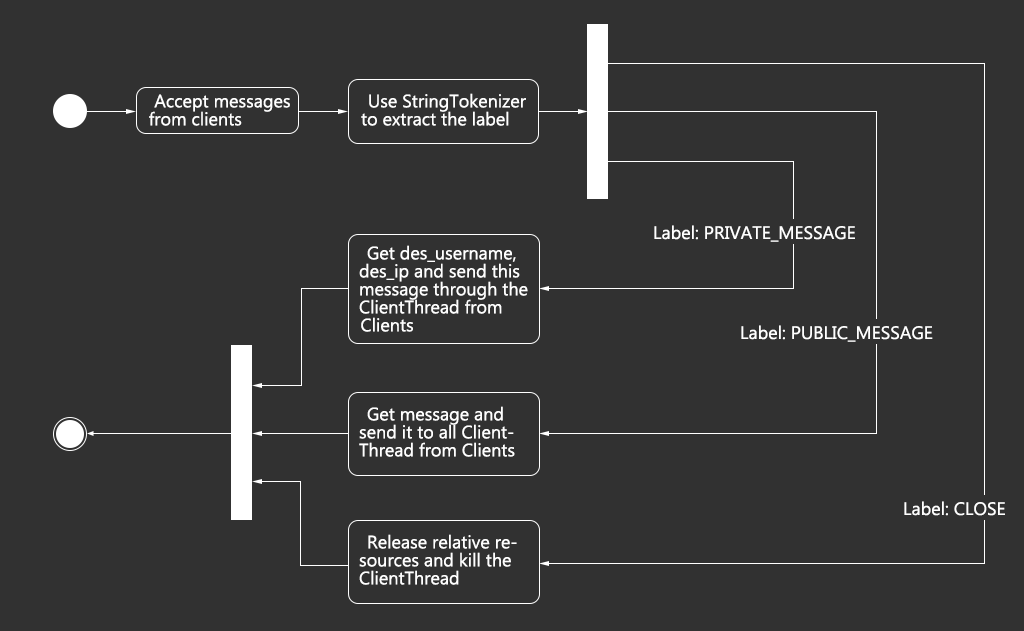
<style>
.page{position:relative;width:1024px;height:631px;background:#313131}
.page>*{position:absolute;margin:0}
.t1{font:18px/18px "MicrosoftNewTaiLue";color:#ffffff}
.t2{font:18px "MicrosoftNewTaiLue";color:#ffffff}
</style>
<div class="page">
<p class="t1" style="left:149px;top:94px;width:141px;height:32px">Accept messages from clients</p>
<p class="t1" style="left:361px;top:93px;width:165px;height:33px">Use StringTokenizer to extract the label</p>
<p class="t2" style="left:654px;top:225px;width:201px;height:17px">Label: PRIVATE_MESSAGE</p>
<p class="t1" style="left:359px;top:245px;width:169px;height:87px">Get des_username, des_ip and send this message through the ClientThread from Clients</p>
<p class="t2" style="left:741px;top:325px;width:192px;height:17px">Label: PUBLIC_MESSAGE</p>
<p class="t1" style="left:359px;top:406px;width:156px;height:51px">Get message and send it to all ClientThread from Clients</p>
<p class="t2" style="left:904px;top:501px;width:101px;height:15px">Label: CLOSE</p>
<p class="t1" style="left:359px;top:534px;width:158px;height:51px">Release relative resources and kill the ClientThread</p>
</div>
